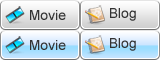
<style>
.page{position:relative;width:160px;height:60px}
.page>*{position:absolute;margin:0}
.t1{font:14px "ArialMT";color:#333333}
</style>
<div class="page">
<p class="t1" style="left:30px;top:10px;width:36px;height:10px">Movie</p>
<p class="t1" style="left:110px;top:8px;width:26px;height:13px">Blog</p>
<p class="t1" style="left:30px;top:40px;width:36px;height:10px">Movie</p>
<p class="t1" style="left:110px;top:38px;width:26px;height:13px">Blog</p>
</div>
